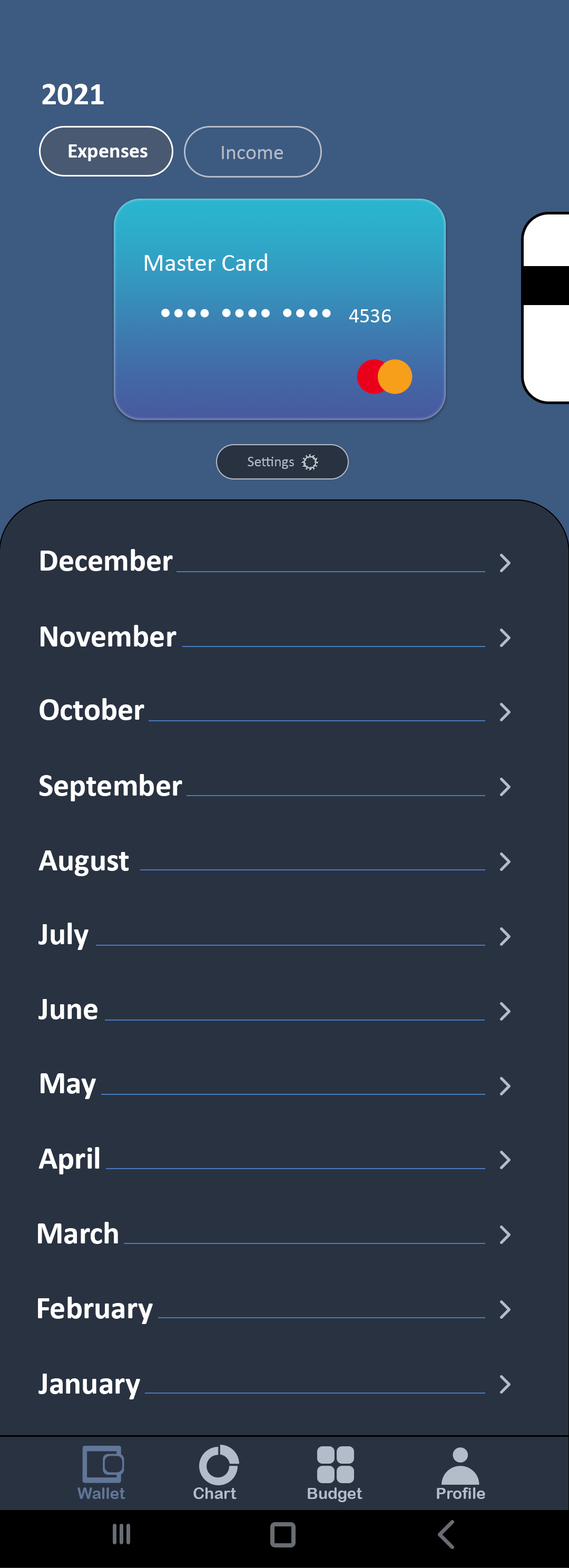
<style>
.page{position:relative;width:569px;height:1568px;background:#293241}
.page>*{position:absolute;margin:0}
.t1{font:31.6px "Calibri-Bold";color:#ffffff}
.t2{font:21.1px "Calibri-Bold";color:#ffffff}
.t3{font:21.1px "Calibri";color:#b4bcc9}
.t4{font:25.3px "Calibri";color:#ffffff}
.t5{font:21.1px "Calibri";color:#ffffff}
.t6{font:14.8px "Calibri";color:#b4bcc9}
.t7{font:15.8px "ArialRoundedMTBold";color:#617698}
.t8{font:15.8px "ArialRoundedMTBold";color:#b4bcc9}
</style>
<div class="page">
<p class="t1" style="left:42px;top:84px;width:62px;height:21px">2021</p>
<p class="t2" style="left:68px;top:144px;width:80px;height:17px">Expenses</p>
<p class="t3" style="left:222px;top:146px;width:61px;height:13px">Income</p>
<p class="t4" style="left:145px;top:253px;width:122px;height:18px">Master Card</p>
<p class="t5" style="left:349px;top:309px;width:42px;height:13px">4536</p>
<p class="t6" style="left:248px;top:457px;width:46px;height:12px">Settings</p>
<p class="t1" style="left:41px;top:549px;width:132px;height:22px">December</p>
<p class="t1" style="left:41px;top:625px;width:136px;height:22px">November</p>
<p class="t1" style="left:40px;top:698px;width:104px;height:22px">October</p>
<p class="t1" style="left:39px;top:774px;width:143px;height:27px">September</p>
<p class="t1" style="left:38px;top:850px;width:91px;height:26px">August</p>
<p class="t1" style="left:38px;top:923px;width:51px;height:27px">July</p>
<p class="t1" style="left:38px;top:999px;width:59px;height:21px">June</p>
<p class="t1" style="left:41px;top:1073px;width:55px;height:26px">May</p>
<p class="t1" style="left:38px;top:1147px;width:62px;height:27px">April</p>
<p class="t1" style="left:38px;top:1222px;width:80px;height:22px">March</p>
<p class="t1" style="left:38px;top:1297px;width:115px;height:27px">February</p>
<p class="t1" style="left:38px;top:1374px;width:102px;height:25px">January</p>
<p class="t7" style="left:77px;top:1487px;width:48px;height:12px">Wallet</p>
<p class="t8" style="left:193px;top:1487px;width:44px;height:12px">Chart</p>
<p class="t8" style="left:308px;top:1487px;width:54px;height:15px">Budget</p>
<p class="t8" style="left:437px;top:1487px;width:48px;height:12px">Profile</p>
</div>
